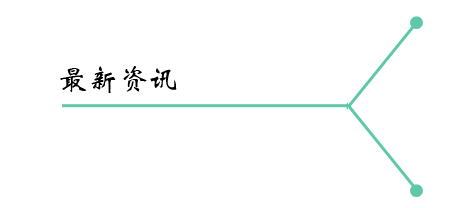
<style>
.page{position:relative;width:470px;height:208px;background:#ffffff}
.page>*{position:absolute;margin:0}
.t1{font:30px "STXinwei";color:#000000}
</style>
<div class="page">
<p class="t1" style="left:60px;top:66px;width:117px;height:27px">最新资讯</p>
</div>
